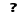
<style>
.page{position:relative;width:27px;height:15px;background:#ffffff}
.page>*{position:absolute;margin:0}
.t1{font:12.9px "MyriadPro-Bold";color:#000000;scale:1.52 1}
</style>
<div class="page">
<p class="t1" style="left:10px;top:3px;width:7px;height:9px">?</p>
</div>
